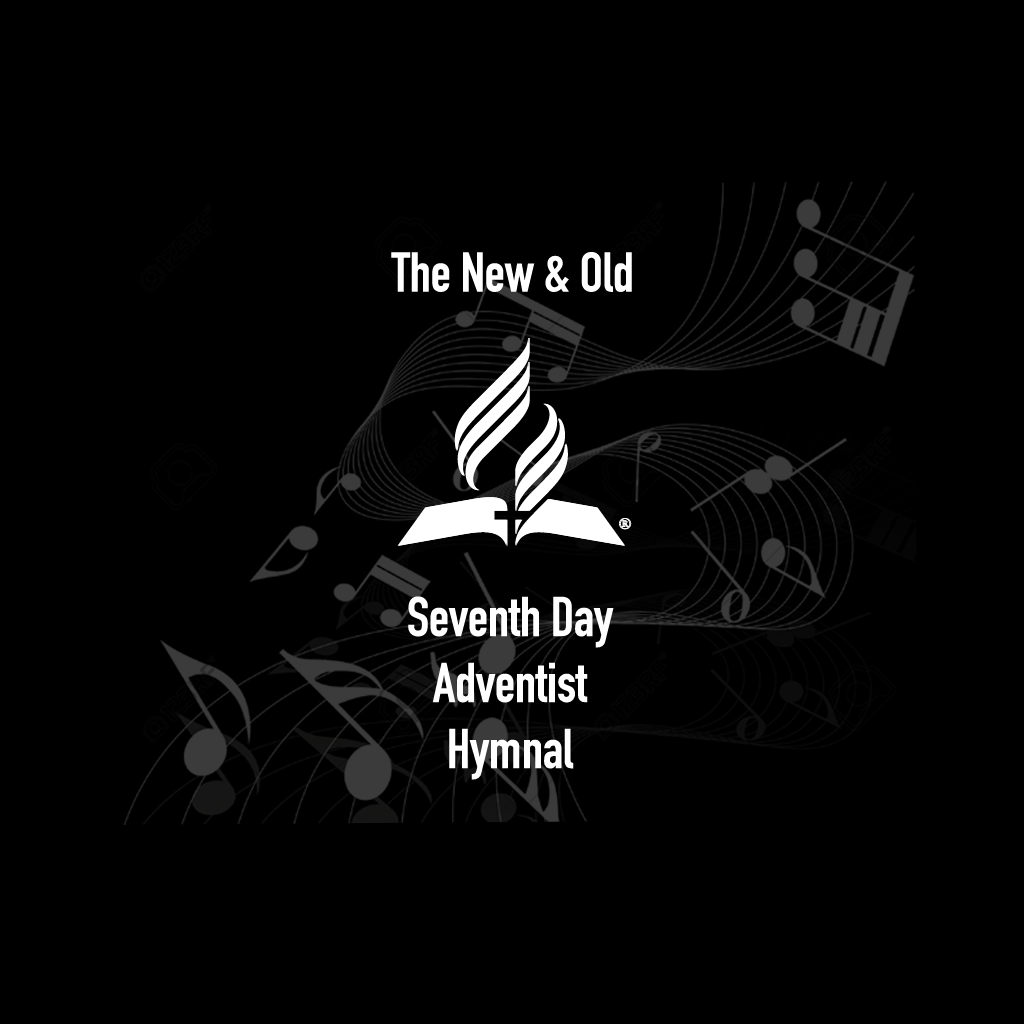
<style>
.page{position:relative;width:1024px;height:1024px;background:#000000}
.page>*{position:absolute;margin:0}
.t1{font:55px "DINCondensed-Bold";color:#ffffff}
</style>
<div class="page">
<p class="t1" style="left:391px;top:252px;width:241px;height:40px">The New &amp; Old</p>
<p class="t1" style="left:408px;top:596px;width:206px;height:184px;text-align:center">Seventh Day<br>Adventist<br>Hymnal</p>
</div>
